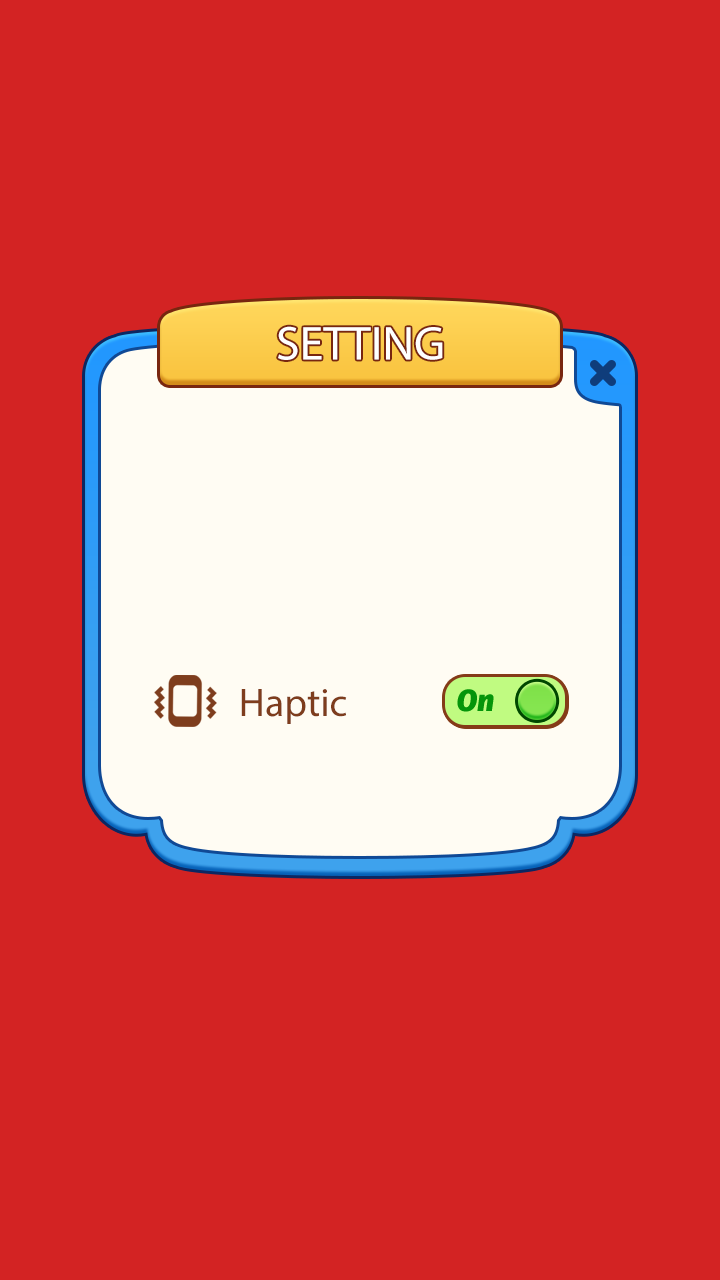
<style>
.page{position:relative;width:720px;height:1280px;background:#d32323}
.page>*{position:absolute;margin:0}
.t1{font:48px "MyriadPro-Regular";color:#ffffff}
.t2{font:40px "MyriadPro-Regular";color:#7e3d1d}
</style>
<div class="page">
<p class="t1" style="left:278px;top:326px;width:165px;height:34px">SETTING</p>
<p class="t2" style="left:241px;top:689px;width:106px;height:35px">Haptic</p>
</div>
